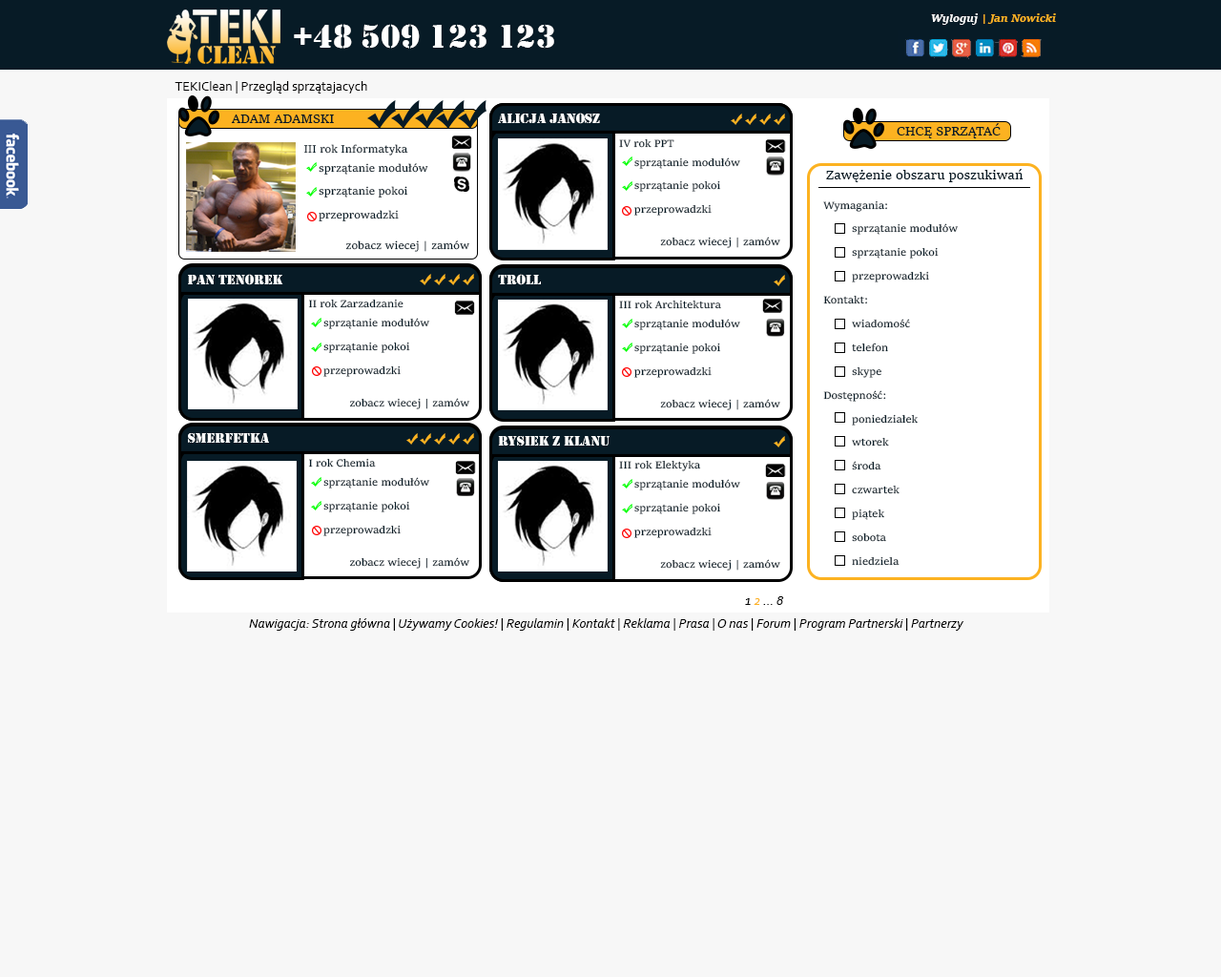
<style>
.page{position:relative;width:1221px;height:977px;background:#f7f7f7}
.page>*{position:absolute;margin:0}
.t1{font:11.4px "SitkaText-BoldItalic";color:#fcb324}
.t2{font:11.4px "SitkaText-BoldItalic";color:#ffffff}
.t3{font:34.3px "Stencil";color:#ffffff}
.t4{font:13.4px "Corbel";color:#010000}
.t5{font:14.2px "Stencil";color:#fefefe}
.t6{font:13.4px "SitkaText";color:#071b26}
.t7{font:11.4px "SitkaText";color:#071b26}
.t8{font:11.1px "SitkaText";color:#071b26}
.t9{font:11.1px/23.7px "SitkaText";color:#071b26}
.t10{font:11.4px/23.7px "SitkaText";color:#071b26}
.t11{font:14.2px "Stencil";color:#ffffff}
.t12{font:13.4px "Corbel-Italic";color:#010101}
.t13{font:13.4px "Corbel-Italic";color:#fcb221}
</style>
<div class="page">
<p class="t1" style="left:931px;top:13px;width:125px;height:12px"><span class="t2">Wyloguj </span>| Jan Nowicki</p>
<p class="t3" style="left:294px;top:24px;width:260px;height:25px">+48 509 123 123</p>
<p class="t4" style="left:175px;top:81px;width:192px;height:12px">TEKIClean | Przegląd sprzątajacych</p>
<p class="t5" style="left:498px;top:113px;width:102px;height:11px">ALicja jANOSZ</p>
<p class="t6" style="left:231px;top:114px;width:103px;height:9px">ADAM ADAMSKI</p>
<p class="t6" style="left:897px;top:123px;width:104px;height:15px">CHCĘ SPRZĄTAĆ</p>
<p class="t7" style="left:303px;top:144px;width:105px;height:11px">III rok Informatyka</p>
<p class="t8" style="left:619px;top:138px;width:55px;height:10px">IV rok PPT</p>
<p class="t9" style="left:634px;top:157px;width:106px;height:59px">sprzątanie modułów<br>sprzątanie pokoi<br>przeprowadzki</p>
<p class="t10" style="left:319px;top:163px;width:109px;height:58px">sprzątanie modułów<br>sprzątanie pokoi<br>przeprowadzki</p>
<p class="t6" style="left:826px;top:169px;width:197px;height:13px">Zawężenie obszaru poszukiwań</p>
<p class="t9" style="left:823px;top:200px;width:136px;height:366px">Wymagania: <br> sprzątanie modułów<br> sprzątanie pokoi<br> przeprowadzki<br>Kontakt:<br> wiadomość<br> telefon<br> skype<br>Dostępność:<br> poniedziałek<br> wtorek<br> środa<br> czwartek<br> piątek<br> sobota<br> niedziela</p>
<p class="t7" style="left:345px;top:240px;width:124px;height:12px">zobacz wiecej | zamów</p>
<p class="t8" style="left:660px;top:237px;width:120px;height:11px">zobacz wiecej | zamów</p>
<p class="t11" style="left:188px;top:274px;width:95px;height:11px">pAN tENOREK</p>
<p class="t11" style="left:498px;top:274px;width:43px;height:11px">tROLL</p>
<p class="t8" style="left:308px;top:299px;width:95px;height:9px">II rok Zarzadzanie</p>
<p class="t8" style="left:619px;top:299px;width:102px;height:10px">III rok Architektura</p>
<p class="t9" style="left:323px;top:318px;width:107px;height:59px">sprzątanie modułów<br>sprzątanie pokoi<br>przeprowadzki</p>
<p class="t9" style="left:634px;top:319px;width:106px;height:59px">sprzątanie modułów<br>sprzątanie pokoi<br>przeprowadzki</p>
<p class="t8" style="left:349px;top:398px;width:121px;height:11px">zobacz wiecej | zamów</p>
<p class="t8" style="left:660px;top:399px;width:120px;height:11px">zobacz wiecej | zamów</p>
<p class="t11" style="left:188px;top:433px;width:81px;height:10px">SMERFETKA</p>
<p class="t11" style="left:498px;top:436px;width:111px;height:9px">RYSIEK Z KLANU</p>
<p class="t8" style="left:308px;top:458px;width:68px;height:9px">I rok Chemia</p>
<p class="t8" style="left:619px;top:460px;width:82px;height:11px">III rok Elektyka</p>
<p class="t9" style="left:323px;top:477px;width:107px;height:59px">sprzątanie modułów<br>sprzątanie pokoi<br>przeprowadzki</p>
<p class="t9" style="left:634px;top:479px;width:106px;height:59px">sprzątanie modułów<br>sprzątanie pokoi<br>przeprowadzki</p>
<p class="t8" style="left:349px;top:557px;width:121px;height:11px">zobacz wiecej | zamów</p>
<p class="t8" style="left:660px;top:559px;width:120px;height:11px">zobacz wiecej | zamów</p>
<p class="t12" style="left:745px;top:596px;width:39px;height:9px">1 <span class="t13">2</span> ... 8</p>
<p class="t12" style="left:249px;top:618px;width:715px;height:12px">Nawigacja: Strona główna | Używamy Cookies! | Regulamin | Kontakt | Reklama | Prasa | O nas | Forum | Program Partnerski | Partnerzy</p>
</div>
